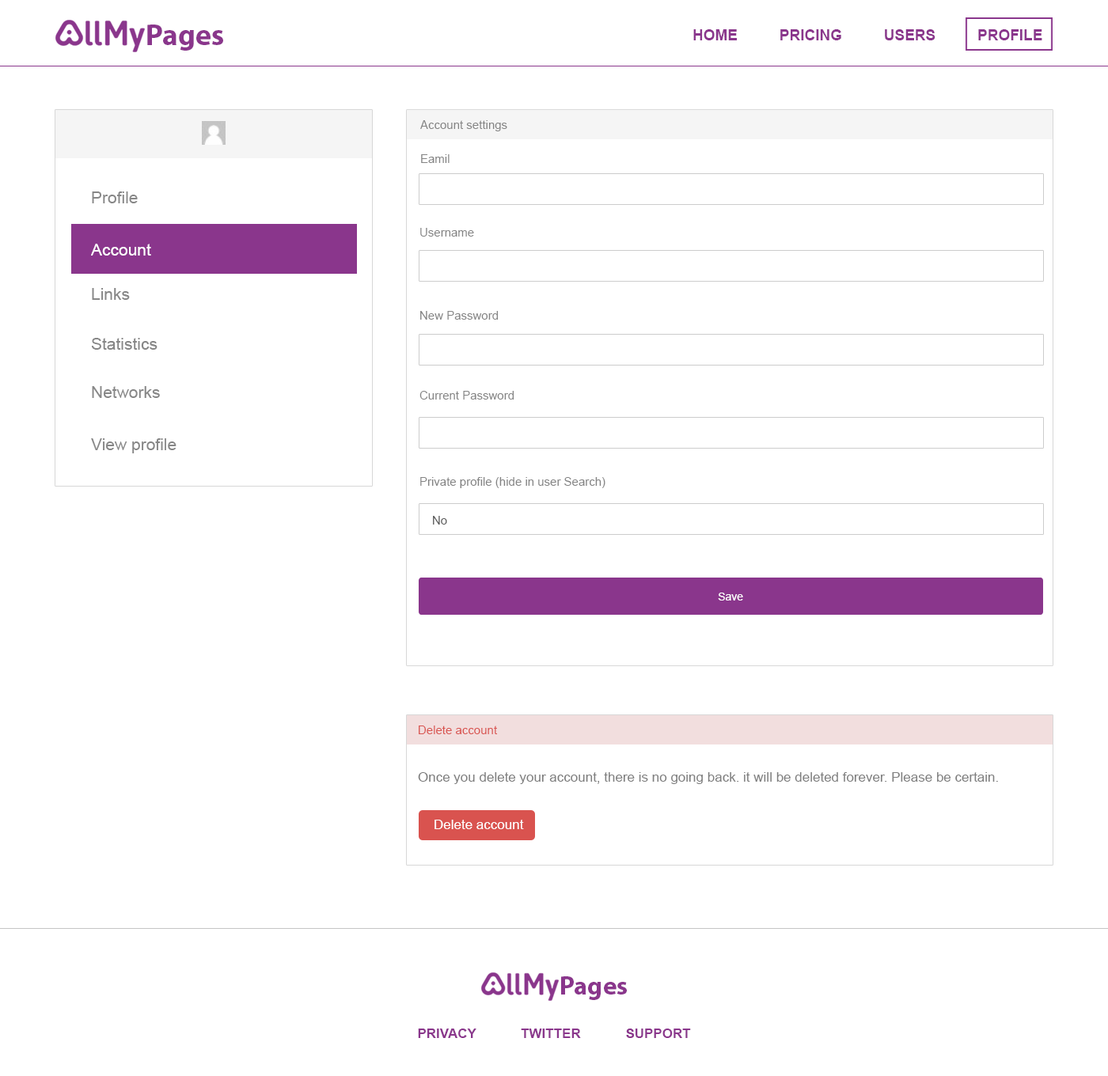
<style>
.page{position:relative;width:1108px;height:1076px;background:#ffffff}
.page>*{position:absolute;margin:0}
.t1{font:29.9px "MyriadPro-Bold";color:#8a368c}
.t2{font:15px "Arial-BoldMT";color:#8a368c}
.t3{font:11.9px "ArialMT";color:#848484}
.t4{font:16.6px "ArialMT";color:#878787}
.t5{font:16.6px "ArialMT";color:#ffffff}
.t6{font:11.9px "ArialMT";color:#5a5a5a}
.t7{font:11px "ArialMT";color:#ffffff}
.t8{font:11.9px "ArialMT";color:#d9534f}
.t9{font:13.5px "ArialMT";color:#7f7f7f}
.t10{font:13.5px "ArialMT";color:#ffffff}
.t11{font:26.2px "MyriadPro-Bold";color:#8a368c}
.t12{font:13.5px "Arial-BoldMT";color:#8a368c}
</style>
<div class="page">
<p class="t1" style="left:147px;top:25px;width:76px;height:26px">Pages</p>
<p class="t2" style="left:693px;top:29px;width:349px;height:11px">HOME          PRICING          USERS          PROFILE</p>
<p class="t3" style="left:420px;top:120px;width:87px;height:11px">Account settings</p>
<p class="t3" style="left:421px;top:154px;width:29px;height:9px">Eamil</p>
<p class="t4" style="left:92px;top:192px;width:46px;height:11px">Profile</p>
<p class="t3" style="left:420px;top:228px;width:54px;height:9px">Username</p>
<p class="t5" style="left:91px;top:244px;width:60px;height:12px">Account</p>
<p class="t4" style="left:92px;top:288px;width:38px;height:12px">Links</p>
<p class="t3" style="left:420px;top:311px;width:79px;height:9px">New Password</p>
<p class="t4" style="left:91px;top:338px;width:66px;height:12px">Statistics</p>
<p class="t4" style="left:92px;top:386px;width:68px;height:12px">Networks</p>
<p class="t3" style="left:419px;top:391px;width:95px;height:9px">Current Password</p>
<p class="t4" style="left:91px;top:438px;width:85px;height:15px">View profile</p>
<p class="t3" style="left:420px;top:477px;width:185px;height:11px">Private profile (hide in user Search)</p>
<p class="t6" style="left:433px;top:516px;width:14px;height:9px">No</p>
<p class="t7" style="left:718px;top:593px;width:25px;height:8px">Save</p>
<p class="t8" style="left:419px;top:726px;width:79px;height:8px">Delete account</p>
<p class="t9" style="left:418px;top:772px;width:580px;height:12px">Once you delete your account, there is no going back. it will be deleted forever. Please be certain.</p>
<p class="t10" style="left:434px;top:820px;width:90px;height:9px">Delete account</p>
<p class="t11" style="left:561px;top:977px;width:66px;height:23px">Pages</p>
<p class="t12" style="left:418px;top:1029px;width:273px;height:9px">PRIVACY            TWITTER            SUPPORT</p>
</div>
